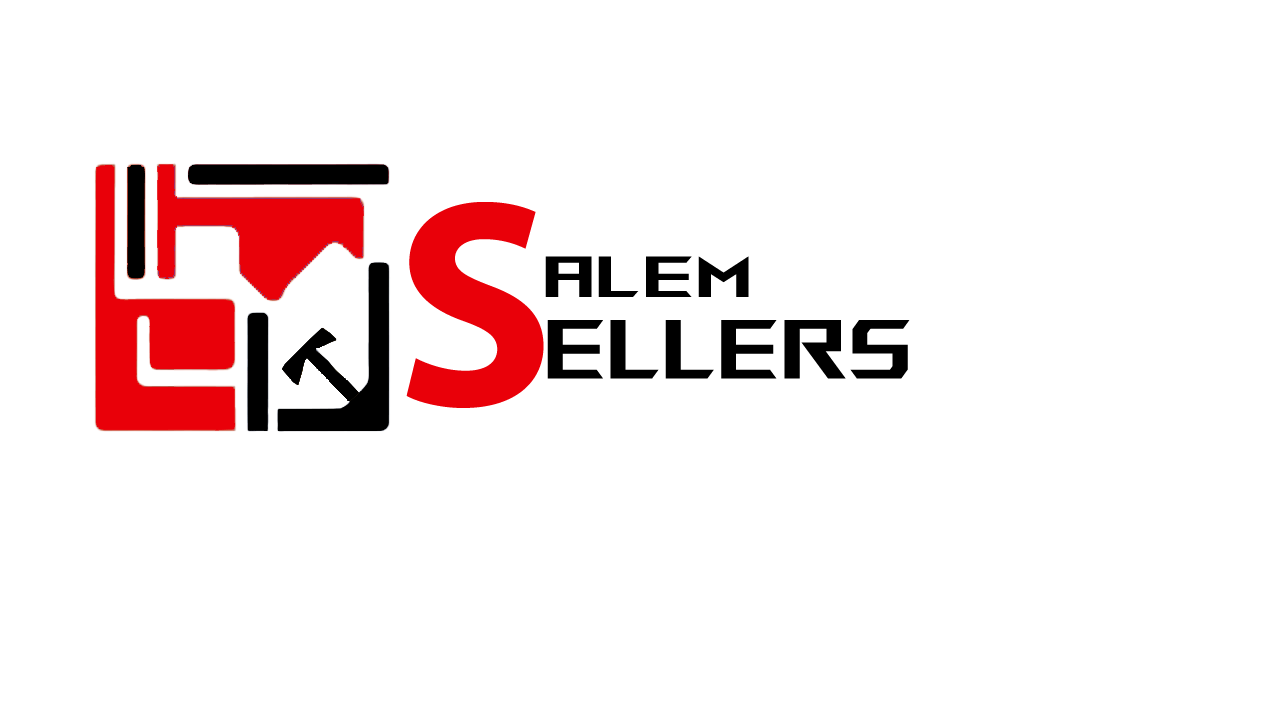
<style>
.page{position:relative;width:1280px;height:723px;background:#ffffff}
.page>*{position:absolute;margin:0}
.t1{font:296.2px "MyriadPro-Bold";letter-spacing:0.05em;color:#e90009;text-transform:uppercase}
.t2{font:57.6px "ROGFontsSTRIXSCAR";letter-spacing:0.05em;color:#000000;text-transform:uppercase}
.t3{font:83.3px "ROGFonts-Regular";letter-spacing:0.05em;color:#000000;text-transform:uppercase;scale:0.84 1}
</style>
<div class="page">
<p class="t1" style="left:406px;top:202px;width:138px;height:206px">s</p>
<p class="t2" style="left:545px;top:256px;width:204px;height:41px">Alem</p>
<p class="t3" style="left:547px;top:320px;width:363px;height:59px">ellers</p>
</div>
